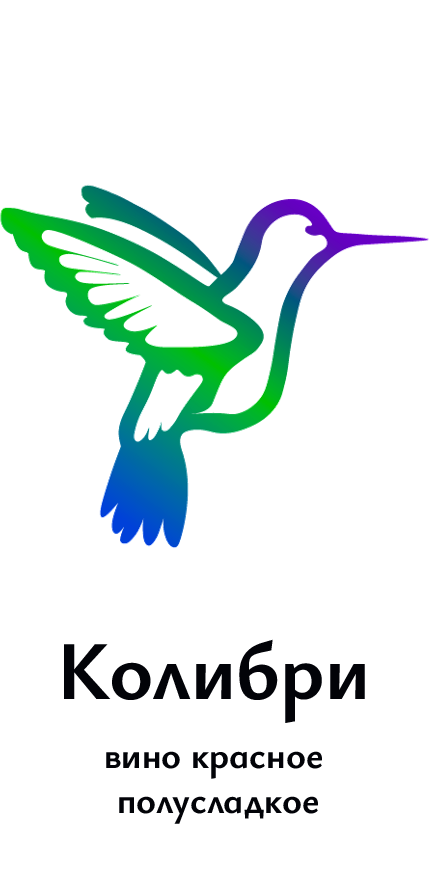
<style>
.page{position:relative;width:429px;height:891px;background:#ffffff}
.page>*{position:absolute;margin:0}
.t1{font:83.3px "YsabeauInfant-Bold";color:#020308}
.t2{font:37.5px "YsabeauInfant-Bold";color:#020308}
</style>
<div class="page">
<p class="t1" style="left:64px;top:639px;width:301px;height:84px">Колибри</p>
<p class="t2" style="left:106px;top:751px;width:216px;height:73px;text-align:center">вино красное <br>полусладкое</p>
</div>
